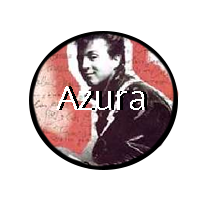
<style>
.page{position:relative;width:200px;height:200px;background:#ffffff}
.page>*{position:absolute;margin:0}
.t1{font:34.3px "OpenSans";color:#ffffff}
.t2{font:34.3px "OpenSans";color:#000000}
</style>
<div class="page">
<p class="t1" style="left:56px;top:86px;width:88px;height:24px">Azura</p>
<p class="t2" style="left:59px;top:86px;width:88px;height:24px">Azura</p>
</div>
